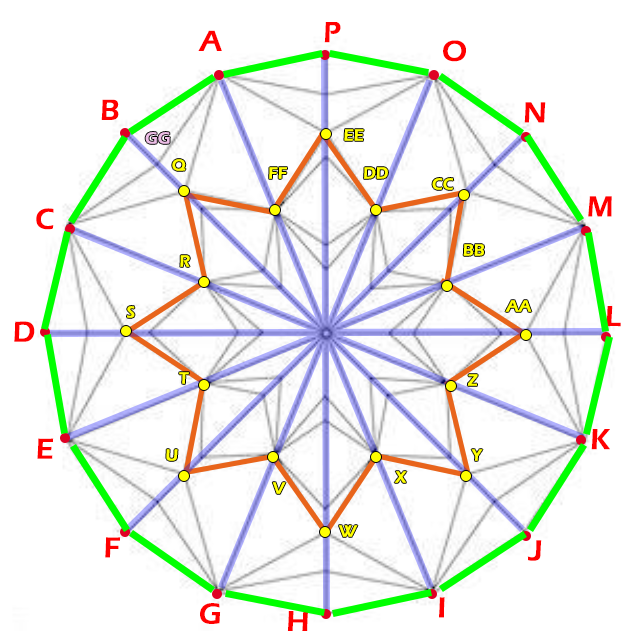
<style>
.page{position:relative;width:628px;height:631px;background:#ffffff}
.page>*{position:absolute;margin:0}
.t1{font:30px "ErasITC-Demi";color:#ff0000}
.t2{font:16.7px "ErasITC-Demi";color:#edbee7}
.t3{font:16.7px "ErasITC-Demi";color:#ffff00}
</style>
<div class="page">
<p class="t1" style="left:198px;top:30px;width:24px;height:21px">A</p>
<p class="t1" style="left:324px;top:22px;width:17px;height:21px">P</p>
<p class="t1" style="left:443px;top:40px;width:23px;height:22px">O</p>
<p class="t1" style="left:101px;top:99px;width:18px;height:21px">B</p>
<p class="t1" style="left:524px;top:102px;width:22px;height:21px">N</p>
<p class="t2" style="left:145px;top:132px;width:25px;height:12px">GG</p>
<p class="t3" style="left:344px;top:129px;width:20px;height:12px">EE</p>
<p class="t3" style="left:172px;top:159px;width:14px;height:12px">Q</p>
<p class="t3" style="left:269px;top:167px;width:18px;height:12px">FF</p>
<p class="t3" style="left:364px;top:167px;width:24px;height:12px">DD</p>
<p class="t3" style="left:432px;top:178px;width:22px;height:12px">CC</p>
<p class="t1" style="left:588px;top:196px;width:24px;height:21px">M</p>
<p class="t1" style="left:36px;top:208px;width:18px;height:22px">C</p>
<p class="t3" style="left:463px;top:244px;width:21px;height:12px">BB</p>
<p class="t3" style="left:180px;top:255px;width:10px;height:12px">R</p>
<p class="t3" style="left:505px;top:300px;width:27px;height:12px">AA</p>
<p class="t3" style="left:127px;top:306px;width:8px;height:12px">S</p>
<p class="t1" style="left:606px;top:306px;width:15px;height:21px">L</p>
<p class="t1" style="left:14px;top:321px;width:21px;height:21px">D</p>
<p class="t3" style="left:179px;top:372px;width:10px;height:12px">T</p>
<p class="t3" style="left:467px;top:374px;width:11px;height:12px">Z</p>
<p class="t1" style="left:37px;top:438px;width:17px;height:21px">E</p>
<p class="t1" style="left:591px;top:429px;width:19px;height:21px">K</p>
<p class="t3" style="left:166px;top:449px;width:12px;height:12px">U</p>
<p class="t3" style="left:471px;top:449px;width:12px;height:12px">Y</p>
<p class="t3" style="left:394px;top:471px;width:13px;height:12px">X</p>
<p class="t3" style="left:272px;top:482px;width:14px;height:12px">V</p>
<p class="t3" style="left:339px;top:525px;width:19px;height:12px">W</p>
<p class="t1" style="left:105px;top:537px;width:16px;height:21px">F</p>
<p class="t1" style="left:527px;top:540px;width:15px;height:21px">J</p>
<p class="t1" style="left:200px;top:603px;width:21px;height:21px">G</p>
<p class="t1" style="left:439px;top:597px;width:6px;height:21px">I</p>
<p class="t1" style="left:287px;top:611px;width:21px;height:21px">H</p>
</div>
